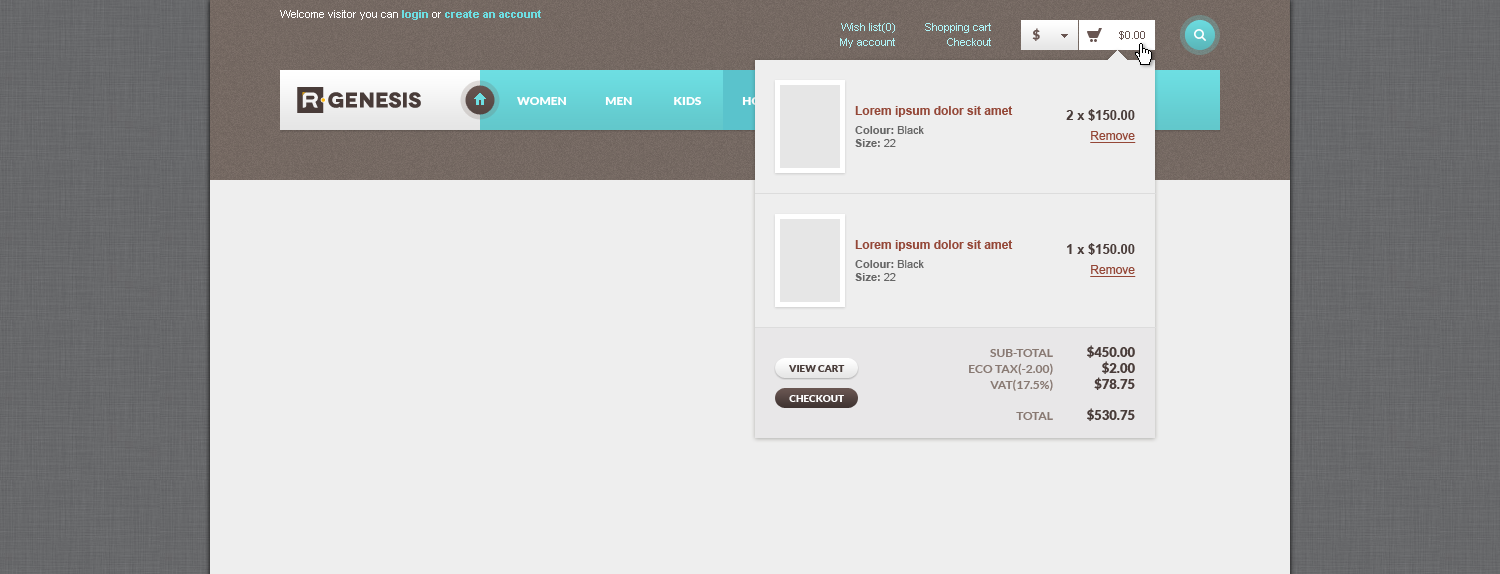
<style>
.page{position:relative;width:1500px;height:574px;background:#eeeeee}
.page>*{position:absolute;margin:0}
.t1{font:11px "ArialMT";color:#ffffff}
.t2{font:11px "Arial-BoldMT";color:#6ddee2}
.t3{font:11px/15px "ArialMT";color:#aff4f7}
.t4{font:13px "Lato-Black";color:#685551}
.t5{font:11px "ArialMT";color:#685551}
.t6{font:12px "Lato-Black";color:#ffffff;text-transform:uppercase}
.t7{font:12px "Arial-BoldMT";color:#944737}
.t8{font:11px/19px "Arial-BoldMT";color:#666666}
.t9{font:11px/19px "ArialMT";color:#666666}
.t10{font:11px "Arial-BoldMT";color:#666666}
.t11{font:11px "ArialMT";color:#666666}
.t12{font:13px/20px "Arial-BoldMT";color:#493c39}
.t13{font:12px/20px "ArialMT";color:#944737;text-decoration:underline}
.t14{font:12px/16px "Lato-Bold";color:#887972;text-transform:uppercase}
.t15{font:12px/31px "Lato-Bold";color:#887972;text-transform:uppercase}
.t16{font:13px/16px "Lato-Black";color:#493c39;text-transform:uppercase}
.t17{font:13px/31px "Lato-Black";color:#493c39;text-transform:uppercase}
</style>
<div class="page">
<p class="t1" style="left:280px;top:10px;width:261px;height:10px">Welcome visitor you can <span class="t2">login</span> or <span class="t2">create an account</span></p>
<p class="t3" style="left:840px;top:23px;width:55px;height:25px;text-align:right">Wish list(0)<br>My account</p>
<p class="t3" style="left:925px;top:23px;width:66px;height:23px;text-align:right">Shopping cart<br>Checkout</p>
<p class="t4" style="left:1032px;top:28px;width:8px;height:13px">$</p>
<p class="t5" style="left:1119px;top:31px;width:26px;height:9px">$0.00</p>
<p class="t6" style="left:517px;top:97px;width:534px;height:8px">Women                Men                 Kids                 Home &amp; Furniture                Gifts                 What's New</p>
<p class="t7" style="left:855px;top:106px;width:158px;height:41px">Lorem ipsum dolor sit amet<br><span class="t8">Colour: </span><span class="t9">Black<br></span><span class="t10">Size: </span><span class="t11">22</span></p>
<p class="t12" style="left:1066px;top:109px;width:70px;height:34px;text-align:right">2 x $150.00<br><span class="t13">Remove</span></p>
<p class="t7" style="left:855px;top:240px;width:158px;height:41px">Lorem ipsum dolor sit amet<br><span class="t8">Colour: </span><span class="t9">Black<br></span><span class="t10">Size: </span><span class="t11">22</span></p>
<p class="t12" style="left:1067px;top:243px;width:69px;height:34px;text-align:right">1 x $150.00<br><span class="t13">Remove</span></p>
<p class="t14" style="left:969px;top:349px;width:84px;height:71px;text-align:right">Sub-Total<br>Eco tax(-2.00)<br>vat(17.5%)<br><span class="t15">Total</span></p>
<p class="t16" style="left:1087px;top:345px;width:48px;height:76px;text-align:right">$450.00<br>$2.00<br>$78.75<br><span class="t17">$530.75</span></p>
</div>
